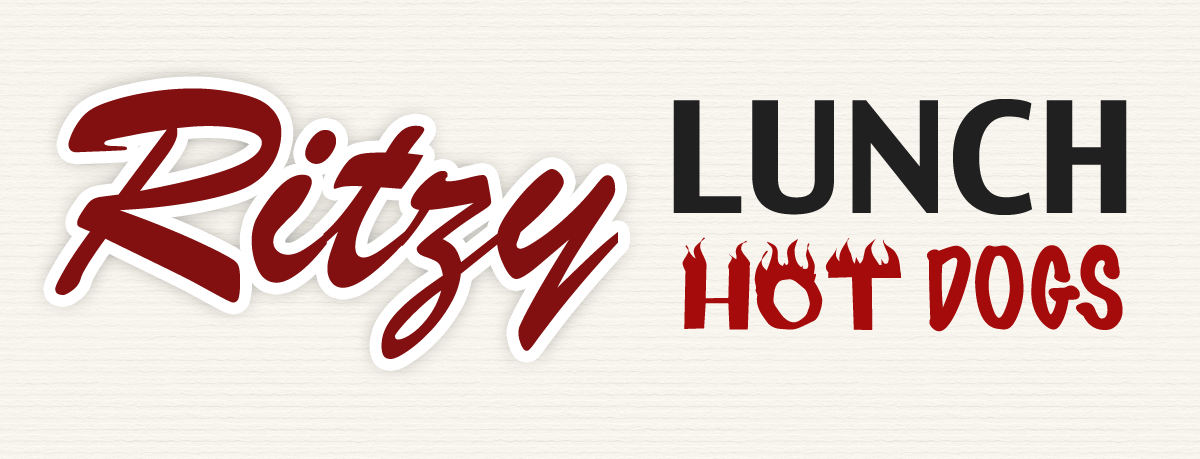
<style>
.page{position:relative;width:1200px;height:459px}
.page>*{position:absolute;margin:0}
.t1{font:315px "BrushScriptMT";color:#831010}
.t2{font:150px "CharcoalCY";color:#202020}
.t3{font:115px "Flame";color:#a50b0b}
.t4{font:100px "MarkerFelt-Thin";color:#a50b0b}
</style>
<div class="page">
<p class="t1" style="left:55px;top:88px;width:563px;height:271px">Ritzy</p>
<p class="t2" style="left:673px;top:99px;width:454px;height:116px">LUNCH</p>
<p class="t3" style="left:682px;top:237px;width:219px;height:93px">HOT</p>
<p class="t4" style="left:927px;top:244px;width:196px;height:88px">DOGS</p>
</div>
